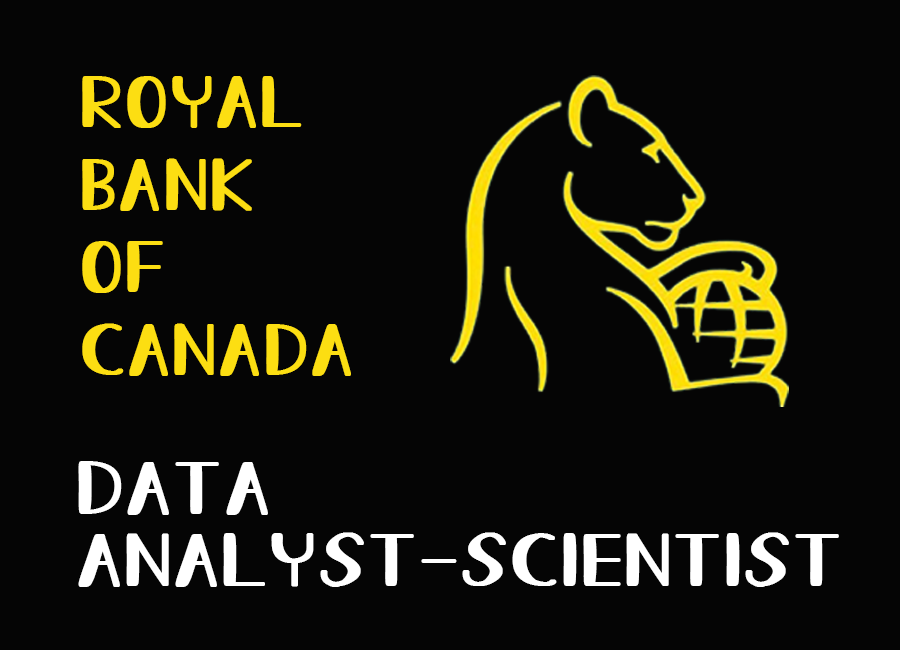
<style>
.page{position:relative;width:900px;height:650px;background:#050505}
.page>*{position:absolute;margin:0}
.t1{font:72.5px/82.7px "AllureOfTheSunRegular";letter-spacing:-0.025em;color:#fcde12;font-weight:bold;scale:1.2 1}
.t2{font:74.3px/72px "AllureOfTheSunRegular";letter-spacing:-0.025em;color:#ffffff;font-weight:bold;scale:1.25 1}
</style>
<div class="page">
<p class="t1" style="left:82px;top:76px;width:269px;height:300px">Royal<br>Bank <br>of <br>canada</p>
<p class="t2" style="left:78px;top:461px;width:761px;height:126px">Data <br>Analyst-Scientist</p>
</div>
